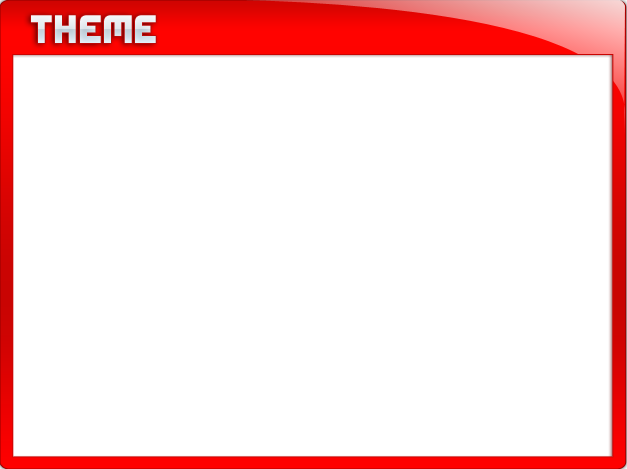
<style>
.page{position:relative;width:627px;height:469px;background:#ffffff}
.page>*{position:absolute;margin:0}
.t1{font:35.5px "Xifiction";color:#e3ebf0}
</style>
<div class="page">
<p class="t1" style="left:31px;top:15px;width:125px;height:28px">THEME</p>
</div>
